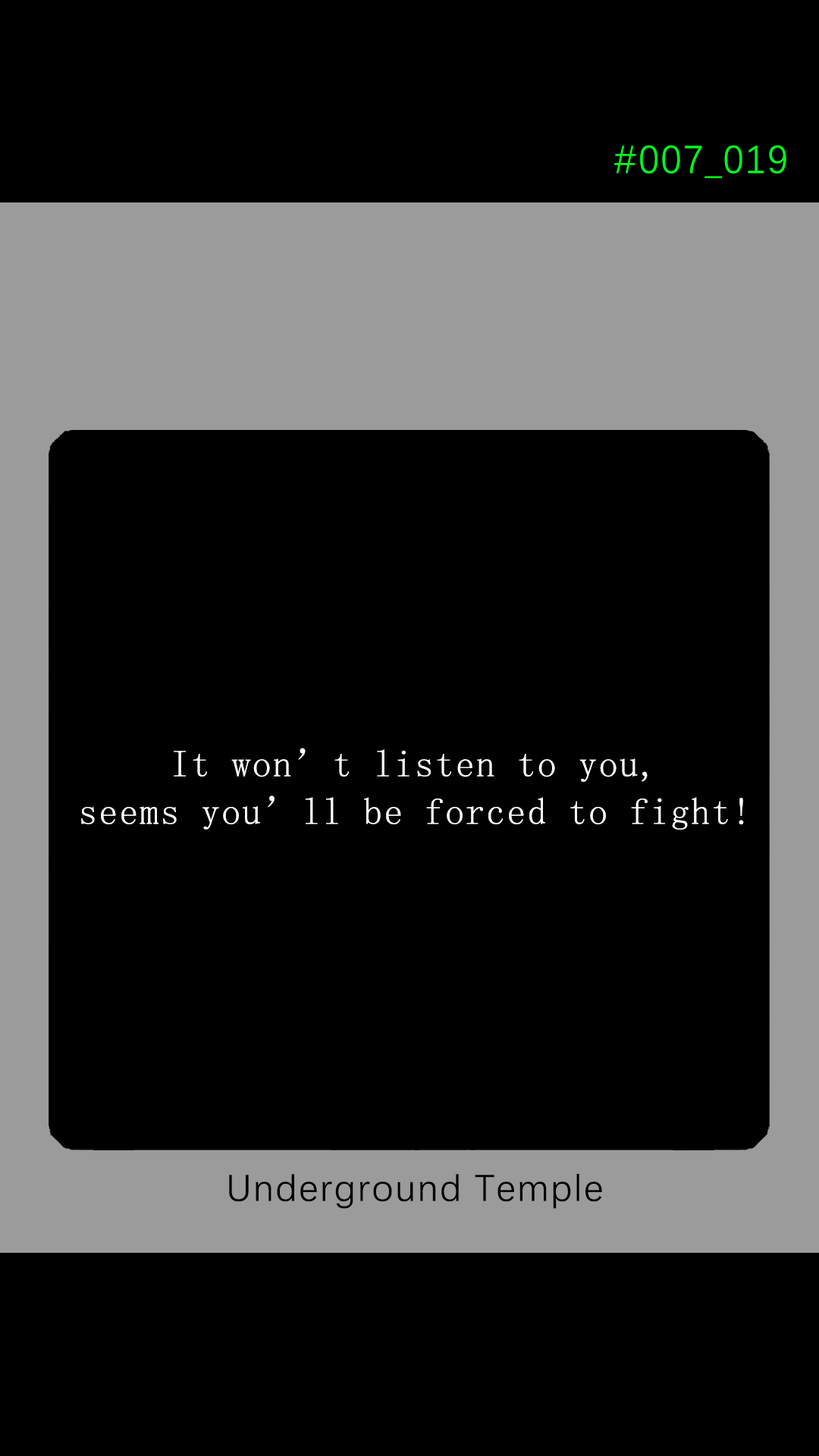
<style>
.page{position:relative;width:819px;height:1456px;background:#000000}
.page>*{position:absolute;margin:0}
.t1{font:39.2px "DengXian-Regular";letter-spacing:0.04em;color:#00ff1e}
.t2{font:37.9px/47.6px "SimSun";letter-spacing:0.04em;color:#ffffff}
.t3{font:37.9px "DengXian-Regular";letter-spacing:0.04em;color:#000000}
</style>
<div class="page">
<p class="t1" style="left:614px;top:145px;width:172px;height:33px">#007_019</p>
<p class="t2" style="left:81px;top:748px;width:663px;height:82px;text-align:center">It won’t listen to you,<br>seems you’ll be forced to fight!</p>
<p class="t3" style="left:229px;top:1174px;width:373px;height:35px">Underground Temple</p>
</div>
